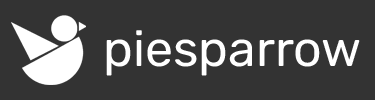
<style>
.page{position:relative;width:375px;height:100px;background:#333333}
.page>*{position:absolute;margin:0}
.t1{font:50px "Rubik-Regular";color:#ffffff}
</style>
<div class="page">
<p class="t1" style="left:106px;top:30px;width:254px;height:46px">piesparrow</p>
</div>
